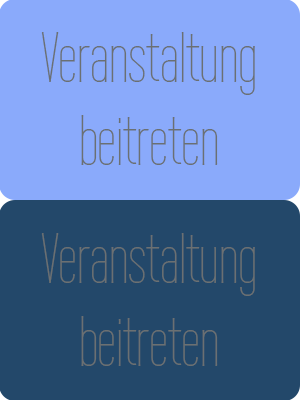
<style>
.page{position:relative;width:300px;height:400px;background:#23486a}
.page>*{position:absolute;margin:0}
.t1{font:69px "WireOne";color:#6b7072}
</style>
<div class="page">
<p class="t1" style="left:41px;top:32px;width:214px;height:133px;text-align:center">Veranstaltung<br>beitreten</p>
<p class="t1" style="left:41px;top:233px;width:214px;height:133px;text-align:center">Veranstaltung<br>beitreten</p>
</div>
